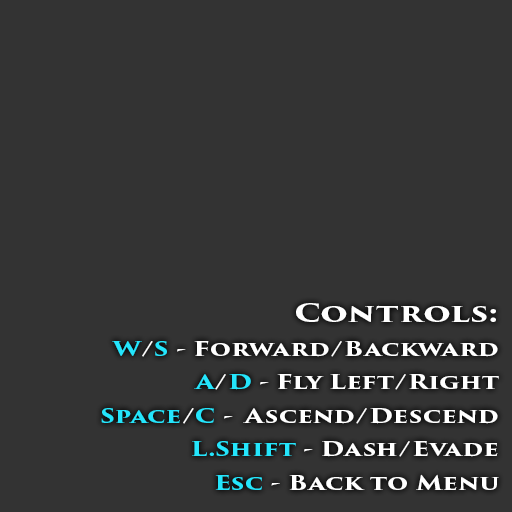
<style>
.page{position:relative;width:512px;height:512px;background:#333333}
.page>*{position:absolute;margin:0}
.t1{font:19.6px "TrajanPro3-Bold";color:#ffffff;scale:1.29 1}
.t2{font:25.2px "TrajanPro3-Bold";color:#ffffff;scale:1.29 1}
.t3{font:19.6px "TrajanPro3-Bold";color:#24e5fc;scale:1.29 1}
.t4{font:19.6px "TrajanPro3-Bold";color:#fefefe;scale:1.29 1}
</style>
<div class="page">
<p class="t1" style="left:101px;top:303px;width:398px;height:187px;text-align:right"><span class="t2">Controls:<br><br></span><span class="t3">W</span>/<span class="t3">S </span>- Forward/Backward<br><br><span class="t3">A</span>/<span class="t3">D </span><span class="t4">- Fly Left/Right<br><br></span><span class="t3">Space</span>/<span class="t3">C </span>-  Ascend/Descend<br><br><span class="t3">L.Shift</span> - Dash/Evade<br><br><span class="t3">Esc </span>- Back to Menu</p>
</div>
